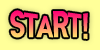
<style>
.page{position:relative;width:100px;height:50px;background:#ffff99}
.page>*{position:absolute;margin:0}
.t1{font:30px "RixComingsoonB";letter-spacing:-0.05em;scale:0.8 1}
</style>
<div class="page">
<p class="t1" style="left:10px;top:10px;width:78px;height:29px">START!</p>
</div>
